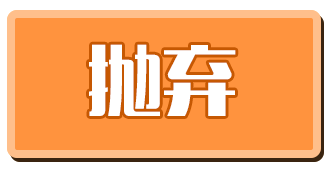
<style>
.page{position:relative;width:332px;height:172px;background:#ff933e}
.page>*{position:absolute;margin:0}
.t1{font:75px "MFLangQian_Noncommercial-Bold";color:#ffffff}
</style>
<div class="page">
<p class="t1" style="left:89px;top:44px;width:147px;height:72px">抛弃</p>
</div>
